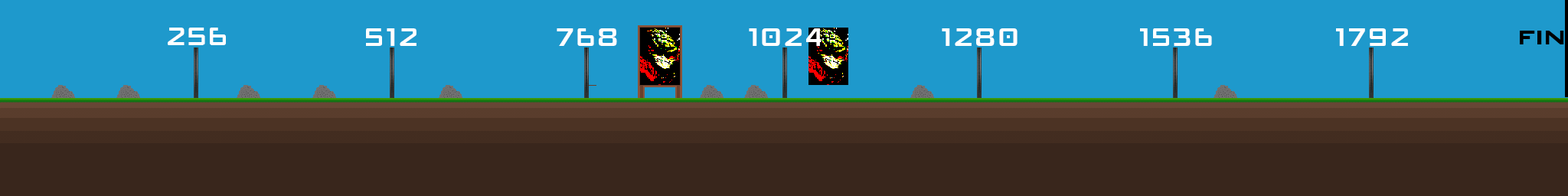
<style>
.page{position:relative;width:1568px;height:196px;background:#1e99cc}
.page>*{position:absolute;margin:0}
.t1{font:22.4px "GAMECUBENDualSet";letter-spacing:0.02em;color:#ffffff}
.t2{font:17.3px "GAMECUBENDualSet";letter-spacing:0.02em;color:#000000}
</style>
<div class="page">
<p class="t1" style="left:168px;top:28px;width:58px;height:17px">256</p>
<p class="t1" style="left:366px;top:28px;width:50px;height:18px">512</p>
<p class="t1" style="left:557px;top:28px;width:60px;height:18px">768</p>
<p class="t1" style="left:749px;top:28px;width:73px;height:18px">1024</p>
<p class="t1" style="left:942px;top:28px;width:76px;height:18px">1280</p>
<p class="t1" style="left:1140px;top:28px;width:72px;height:18px">1536</p>
<p class="t1" style="left:1336px;top:28px;width:72px;height:18px">1792</p>
<p class="t2" style="left:1520px;top:31px;width:44px;height:13px">FIN</p>
</div>
